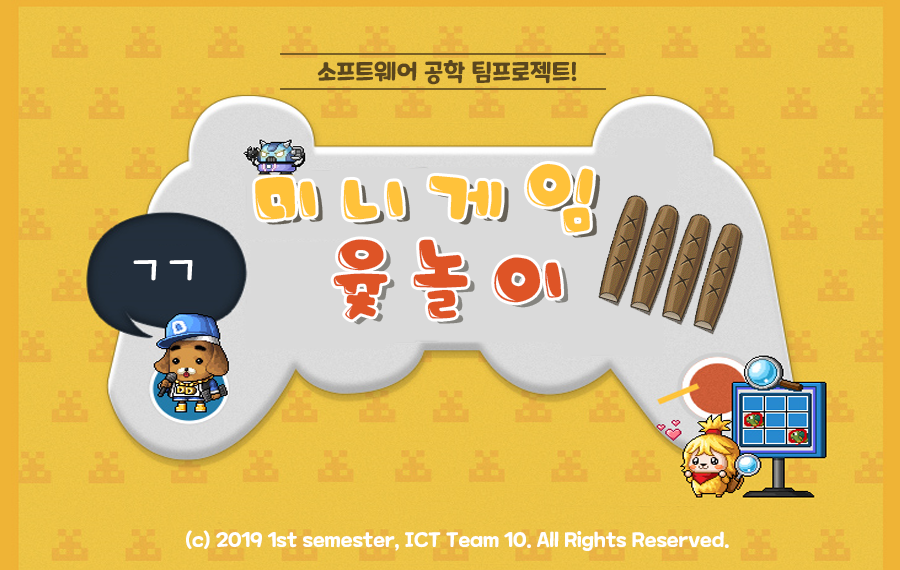
<style>
.page{position:relative;width:900px;height:570px}
.page>*{position:absolute;margin:0}
.t1{font:24px "MaplestoryBold";color:#5a461e}
.t2{font:80px "HUBubbS";color:#ffc23a}
.t3{font:80px "HUBubbS";color:#de5426}
.t4{font:40px "MaplestoryLight";color:#ffffff}
.t5{font:20px "MaplestoryBold";color:#ffffff}
</style>
<div class="page">
<p class="t1" style="left:317px;top:60px;width:260px;height:25px">소프트웨어 공학 팀프로젝트!</p>
<p class="t2" style="left:255px;top:163px;width:339px;height:70px">미 니 게 임</p>
<p class="t3" style="left:333px;top:239px;width:229px;height:81px">윷 놀 이</p>
<p class="t4" style="left:133px;top:260px;width:60px;height:21px">ㄱㄱ</p>
<p class="t5" style="left:186px;top:530px;width:543px;height:21px">(c) 2019 1st semester, ICT Team 10. All Rights Reserved.</p>
</div>
